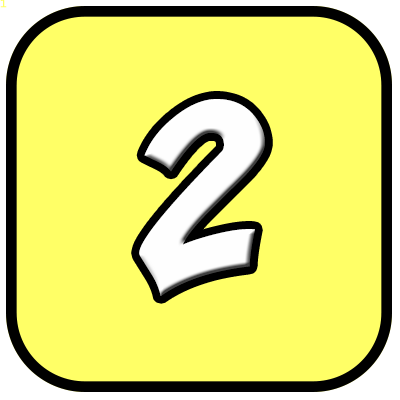
<style>
.page{position:relative;width:400px;height:400px;background:#ffff66}
.page>*{position:absolute;margin:0}
.t1{font:10.7px "LucidaConsole";color:#ffff66}
.t2{font:240px "Yikes";color:#fefefe}
</style>
<div class="page">
<p class="t1" style="left:0px;top:0px;width:7px;height:8px">1</p>
<p class="t2" style="left:139px;top:99px;width:126px;height:197px">2</p>
</div>
